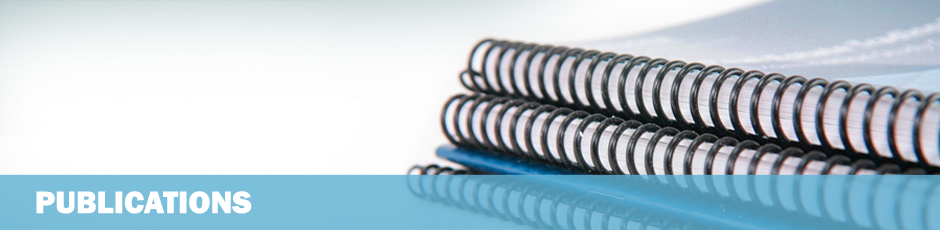
<style>
.page{position:relative;width:940px;height:230px}
.page>*{position:absolute;margin:0}
.t1{font:32px "FranklinGothic-Heavy";color:#ffffff}
</style>
<div class="page">
<p class="t1" style="left:36px;top:191px;width:216px;height:23px">PUBLICATIONS</p>
</div>
